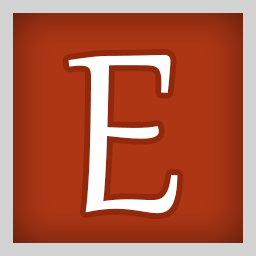
<style>
.page{position:relative;width:256px;height:256px;background:#ae3615}
.page>*{position:absolute;margin:0}
.t1{font:275.8px "Gabriola";color:#ffffff}
</style>
<div class="page">
<p class="t1" style="left:68px;top:54px;width:110px;height:160px">E</p>
</div>
